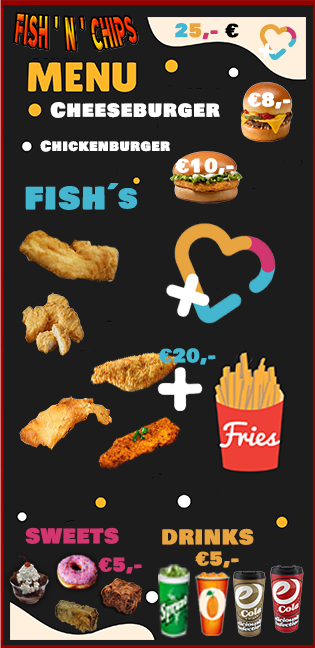
<style>
.page{position:relative;width:315px;height:648px;background:#1c1c1c}
.page>*{position:absolute;margin:0}
.t1{font:18.3px "BowlbyOneSC-Regular";letter-spacing:0.05em;color:#d23670}
.t2{font:18.3px "BowlbyOneSC-Regular";letter-spacing:0.05em;color:#44b6d0}
.t3{font:18.3px "BowlbyOneSC-Regular";letter-spacing:0.05em;color:#e7a43f}
.t4{font:18.3px "BowlbyOneSC-Regular";letter-spacing:0.05em;color:#000000}
.t5{font:20px "BowlbyOneSC-Regular";letter-spacing:0.05em;color:#ffffff}
.t6{font:18.3px "BowlbyOneSC-Regular";letter-spacing:0.05em;color:#ffffff}
.t7{font:14px "BowlbyOneSC-Regular";letter-spacing:0.05em;color:#ffffff}
.t8{font:30px "BowlbyOneSC-Regular";letter-spacing:0.05em;color:#44b6d0}
.t9{font:20px "BowlbyOneSC-Regular";letter-spacing:0.05em;color:#d23670}
.t10{font:20px "BowlbyOneSC-Regular";letter-spacing:0.05em;color:#e7a43f}
</style>
<div class="page">
<p class="t1" style="left:175px;top:23px;width:64px;height:17px"><span class="t2">2</span><span class="t3">5</span>,- <span class="t4">€</span></p>
<p class="t5" style="left:50px;top:102px;width:170px;height:16px">Cheeseburger</p>
<p class="t6" style="left:247px;top:92px;width:44px;height:17px">€8,-</p>
<p class="t7" style="left:40px;top:140px;width:130px;height:12px">Chickenburger</p>
<p class="t6" style="left:175px;top:158px;width:59px;height:17px">€10,-</p>
<p class="t8" style="left:25px;top:183px;width:112px;height:27px">FISH´s</p>
<p class="t2" style="left:158px;top:348px;width:58px;height:17px">€20,-</p>
<p class="t9" style="left:25px;top:527px;width:94px;height:17px">SWEETS</p>
<p class="t10" style="left:162px;top:528px;width:92px;height:17px">DRINKS</p>
<p class="t1" style="left:98px;top:557px;width:44px;height:17px">€5,-</p>
<p class="t3" style="left:195px;top:551px;width:44px;height:17px">€5,-</p>
</div>
